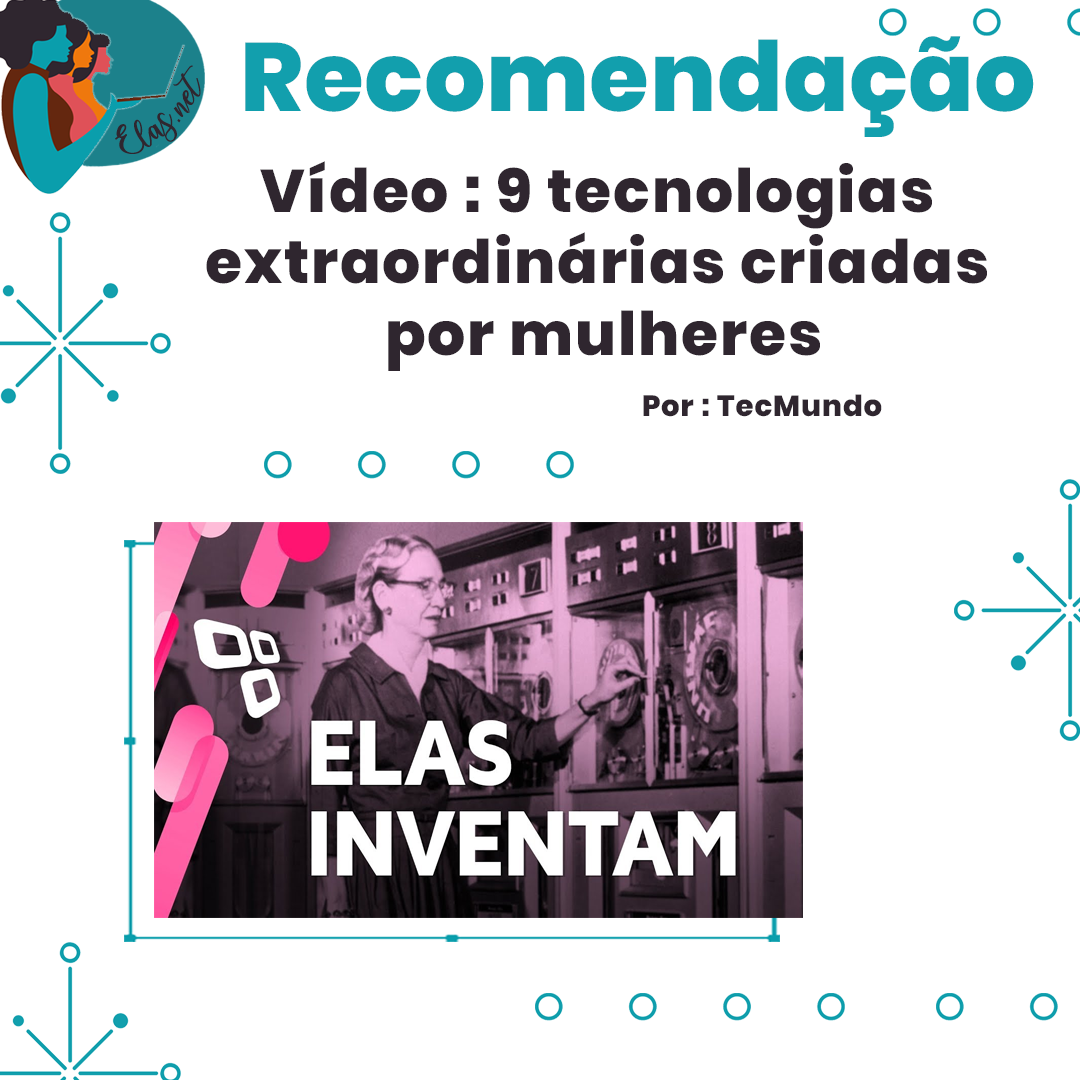
<style>
.page{position:relative;width:1080px;height:1080px;background:#ffffff}
.page>*{position:absolute;margin:0}
.t1{font:96.7px "Poppins-ExtraBold";letter-spacing:0.005em;color:#0a9eac}
.t2{font:25px "charlinda-Regular";color:#2f262f;scale:1.18 1}
.t3{font:60px/71.3px "Poppins-ExtraBold";letter-spacing:0.03em;color:#2f262f}
.t4{font:29.2px "Poppins-ExtraBold";letter-spacing:0.03em;color:#2f262f}
</style>
<div class="page">
<p class="t1" style="left:245px;top:36px;width:789px;height:101px">Recomendação</p>
<p class="t2" style="left:115px;top:65px;width:86px;height:89px;rotate:-43deg">Elas.net</p>
<p class="t3" style="left:206px;top:161px;width:781px;height:210px;text-align:center">Vídeo : 9 tecnologias <br>extraordinárias criadas <br>por mulheres</p>
<p class="t4" style="left:643px;top:394px;width:239px;height:23px">Por : TecMundo</p>
</div>
